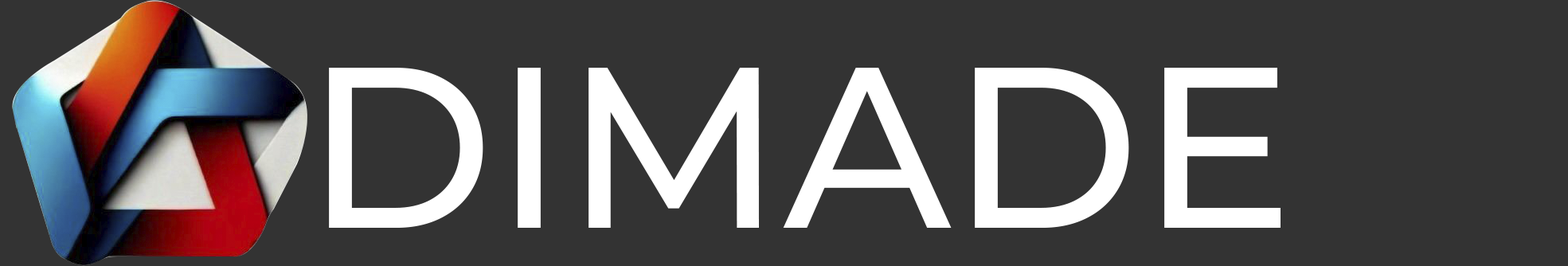
<style>
.page{position:relative;width:1568px;height:266px;background:#333333}
.page>*{position:absolute;margin:0}
.t1{font:228.9px "Montserrat-Medium";color:#ffffff}
</style>
<div class="page">
<p class="t1" style="left:329px;top:68px;width:952px;height:160px">DIMADE</p>
</div>
